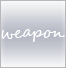
<style>
.page{position:relative;width:66px;height:68px}
.page>*{position:absolute;margin:0}
.t1{font:16px "SegoeScript";color:#ffffff}
</style>
<div class="page">
<p class="t1" style="left:1px;top:29px;width:64px;height:13px">weapon</p>
</div>
